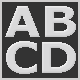
<style>
.page{position:relative;width:80px;height:80px;background:#333333}
.page>*{position:absolute;margin:0}
.t1{font:43.2px/36px "Verdana-Bold";letter-spacing:-0.01em;color:#d9d9da;scale:1.11 1}
</style>
<div class="page">
<p class="t1" style="left:5px;top:6px;width:71px;height:68px">AB<br>CD</p>
</div>
